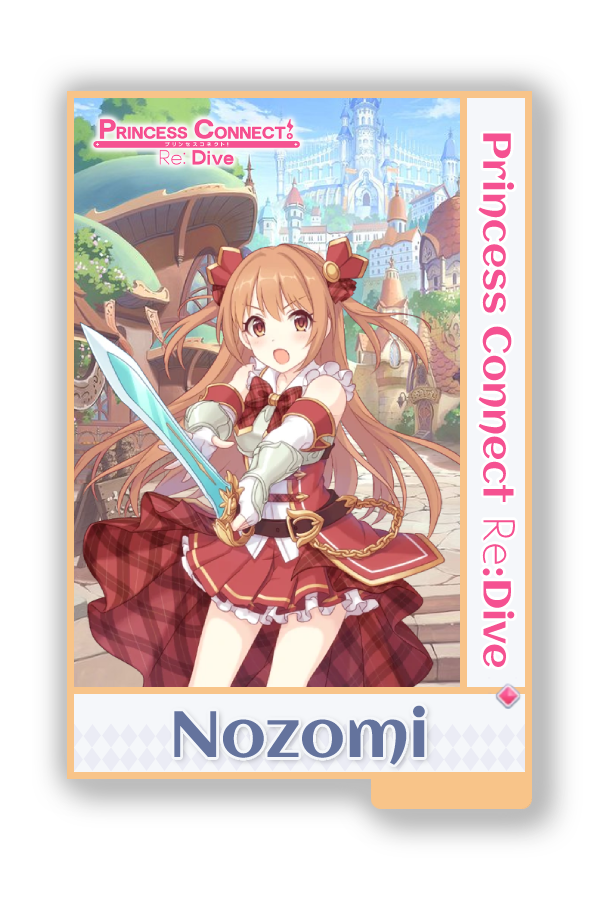
<style>
.page{position:relative;width:600px;height:900px;background:#ffffff}
.page>*{position:absolute;margin:0}
.t1{font:39px "Aclonica-Regular";color:#f55191}
.t2{font:39px "AaarghNormal";color:#f55191}
.t3{font:65px "Aclonica-Regular";color:#64739d}
</style>
<div class="page">
<p class="t1" style="left:478px;top:133px;width:38px;height:534px;rotate:90deg">Princess Connect <span class="t2">Re</span>:Dive</p>
<p class="t3" style="left:174px;top:705px;width:251px;height:60px">Nozomi</p>
</div>
